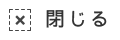
<style>
.page{position:relative;width:120px;height:40px;background:#ffffff}
.page>*{position:absolute;margin:0}
.t1{font:20px "BokutachinoGothic";letter-spacing:0.1em;color:#333333}
</style>
<div class="page">
<p class="t1" style="left:46px;top:10px;width:61px;height:18px">閉じる</p>
</div>
